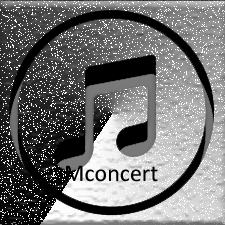
<style>
.page{position:relative;width:225px;height:225px}
.page>*{position:absolute;margin:0}
.t1{font:24px "Calibri";color:#000000}
</style>
<div class="page">
<p class="t1" style="left:66px;top:164px;width:92px;height:17px">Mconcert</p>
</div>
